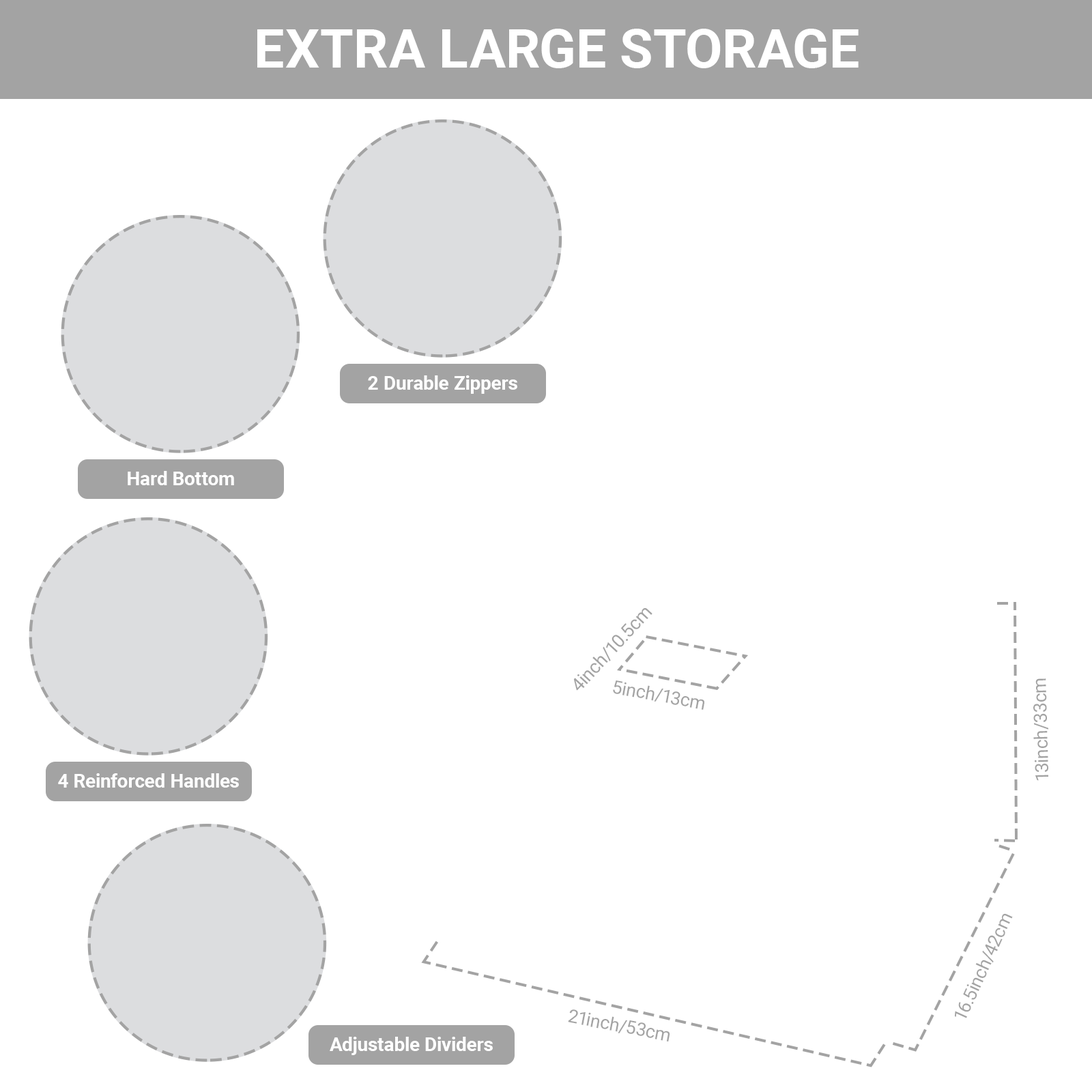
<style>
.page{position:relative;width:1092px;height:1092px;background:#ffffff}
.page>*{position:absolute;margin:0}
.t1{font:54.2px "Roboto-Bold";color:#ffffff}
.t2{font:19.1px "Roboto-Bold";color:#ffffff}
.t3{font:18.3px "Roboto-Regular";color:#a3a3a3}
</style>
<div class="page">
<p class="t1" style="left:257px;top:29px;width:602px;height:39px">EXTRA LARGE STORAGE</p>
<p class="t2" style="left:368px;top:375px;width:149px;height:19px">2 Durable Zippers</p>
<p class="t2" style="left:128px;top:471px;width:106px;height:14px">Hard Bottom</p>
<p class="t3" style="left:573px;top:607px;width:79px;height:84px;rotate:-47deg">4inch/10.5cm</p>
<p class="t3" style="left:613px;top:680px;width:91px;height:30px;rotate:10deg">5inch/13cm</p>
<p class="t3" style="left:1033px;top:678px;width:15px;height:103px;rotate:-92deg">13inch/33cm</p>
<p class="t2" style="left:58px;top:773px;width:181px;height:15px">4 Reinforced Handles</p>
<p class="t3" style="left:955px;top:914px;width:58px;height:104px;rotate:-66deg">16.5inch/42cm</p>
<p class="t3" style="left:568px;top:1009px;width:102px;height:32px;rotate:11deg">21inch/53cm</p>
<p class="t2" style="left:330px;top:1037px;width:163px;height:18px">Adjustable Dividers</p>
</div>
